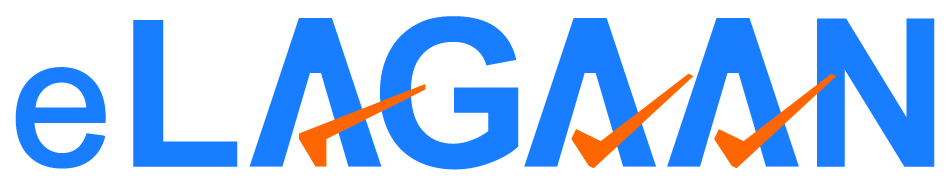
<style>
.page{position:relative;width:950px;height:192px;background:#ffffff}
.page>*{position:absolute;margin:0}
.t1{font:206.4px "Arial-BoldMT";letter-spacing:-0.05em;color:#187eff}
.t2{font:183.5px "ArialMT";letter-spacing:-0.05em;color:#187eff;font-weight:bold}
</style>
<div class="page">
<p class="t1" style="left:133px;top:16px;width:802px;height:154px">L   G      N</p>
<p class="t2" style="left:15px;top:67px;width:91px;height:102px">e</p>
</div>
